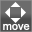
<style>
.page{position:relative;width:32px;height:32px;background:#6c6c6c}
.page>*{position:absolute;margin:0}
.t1{font:11px "ArialMT";color:#ffffff}
</style>
<div class="page">
<p class="t1" style="left:3px;top:24px;width:27px;height:6px">move</p>
</div>
